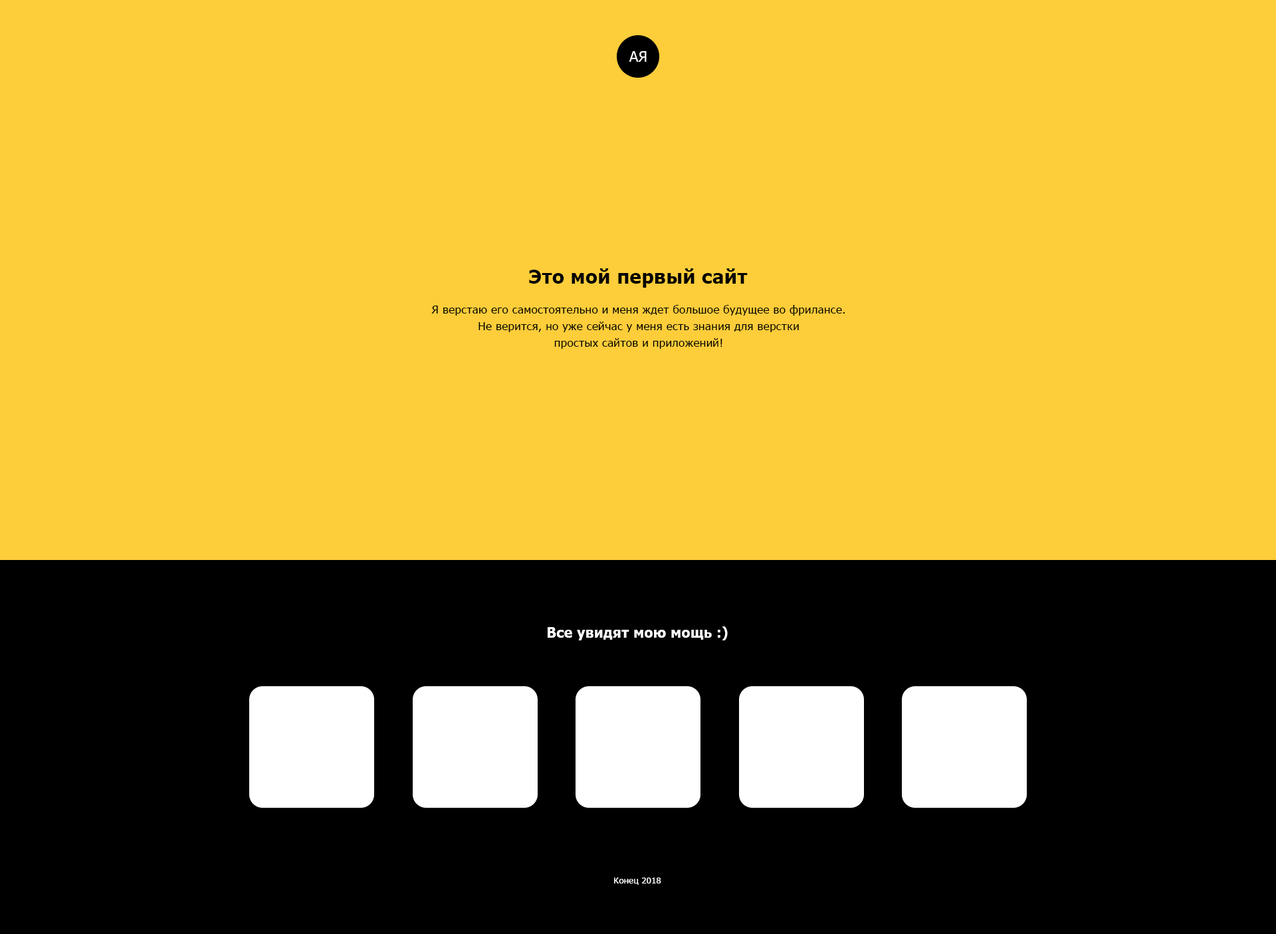
<style>
.page{position:relative;width:1276px;height:934px;background:#fdcd3a}
.page>*{position:absolute;margin:0}
.t1{font:14.6px "Tahoma";letter-spacing:0.02em;color:#ffffff}
.t2{font:19.3px "Tahoma-Bold";letter-spacing:0.02em;color:#000000}
.t3{font:11.3px/16.6px "Tahoma";letter-spacing:0.02em;color:#000000}
.t4{font:14px "Tahoma-Bold";letter-spacing:0.02em;color:#ffffff}
.t5{font:8.6px "Tahoma";letter-spacing:0.02em;color:#ffffff}
</style>
<div class="page">
<p class="t1" style="left:629px;top:51px;width:18px;height:11px">АЯ</p>
<p class="t2" style="left:529px;top:269px;width:219px;height:19px">Это мой первый сайт</p>
<p class="t3" style="left:431px;top:305px;width:414px;height:44px;text-align:center">Я верстаю его самостоятельно и меня ждет большое будущее во фрилансе.<br>Не верится, но уже сейчас у меня есть знания для верстки<br>простых сайтов и приложений!</p>
<p class="t4" style="left:548px;top:627px;width:180px;height:14px">Все увидят мою мощь :)</p>
<p class="t5" style="left:614px;top:878px;width:47px;height:7px">Конец 2018</p>
</div>
